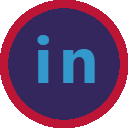
<style>
.page{position:relative;width:128px;height:128px;background:#34275d}
.page>*{position:absolute;margin:0}
.t1{font:65px "MyanmarText-Bold";letter-spacing:0.1em;color:#3399cc}
</style>
<div class="page">
<p class="t1" style="left:37px;top:35px;width:58px;height:48px">in</p>
</div>
